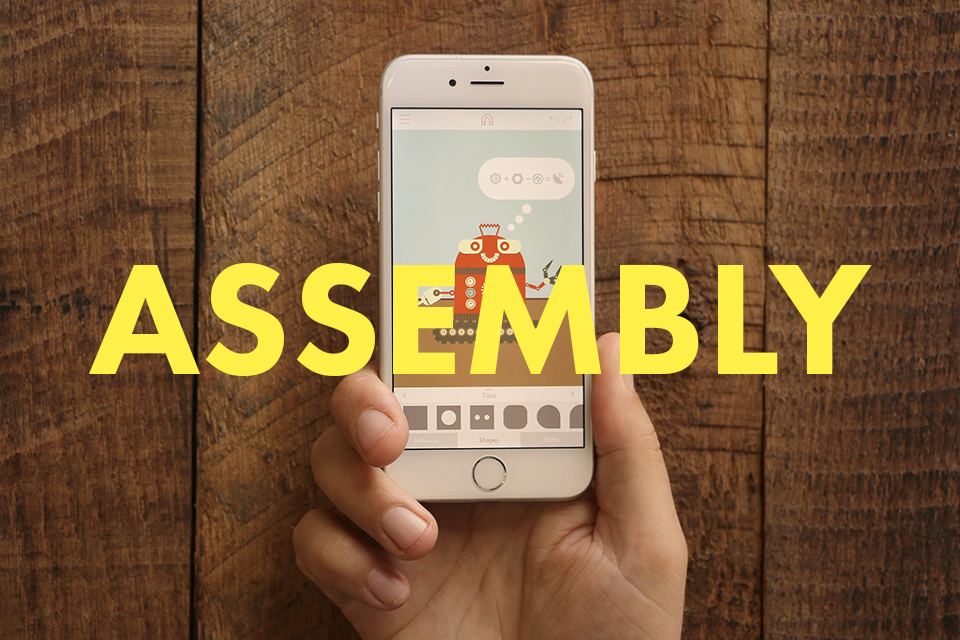
<style>
.page{position:relative;width:960px;height:640px}
.page>*{position:absolute;margin:0}
.t1{font:164px "FuturaPT-Heavy";color:#ffef49}
</style>
<div class="page">
<p class="t1" style="left:89px;top:263px;width:783px;height:113px">ASSEMBLY</p>
</div>
